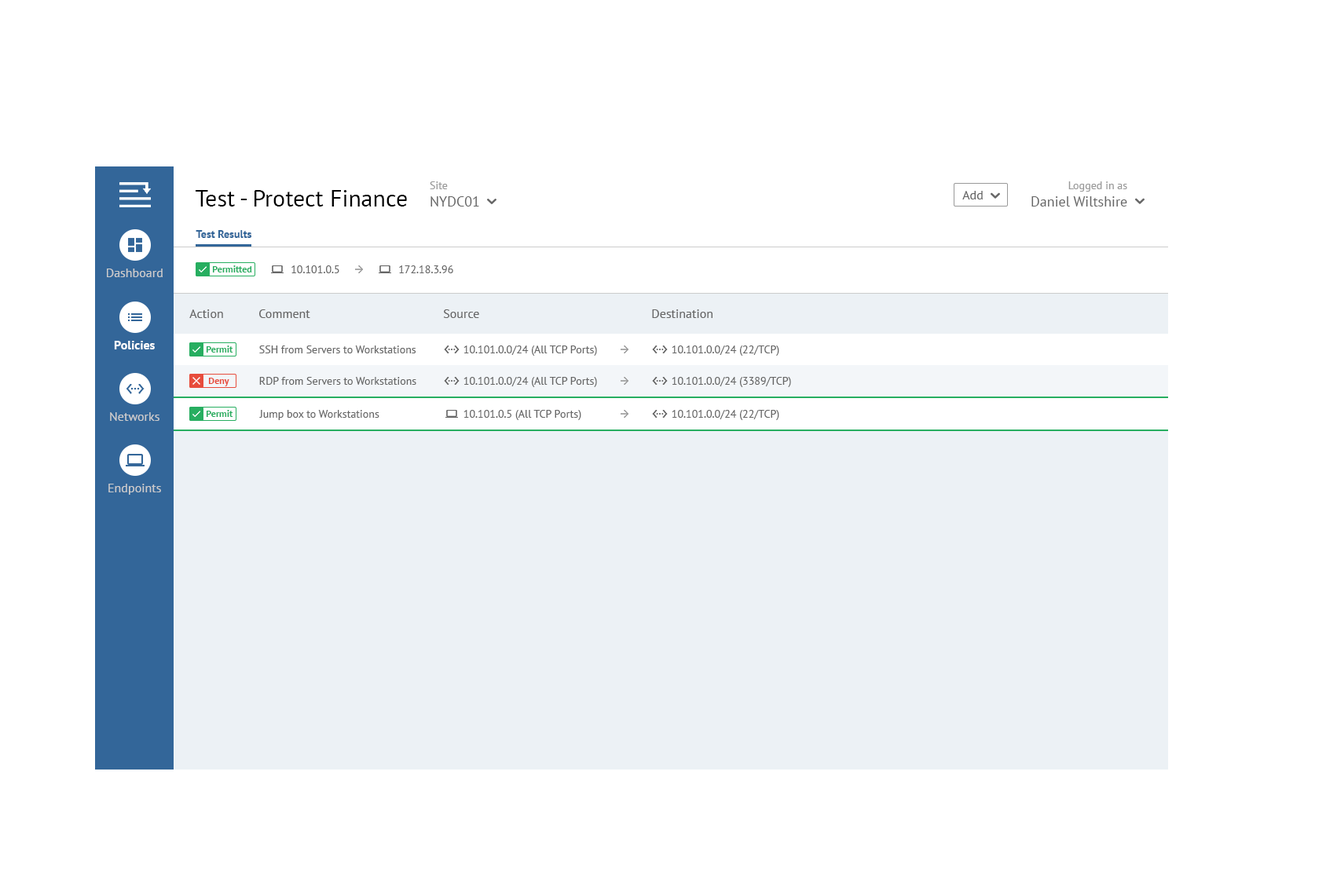
<style>
.page{position:relative;width:1337px;height:892px;background:#ffffff}
.page>*{position:absolute;margin:0}
.t1{font:14.1px "PTSans-Regular";color:#666666}
.t2{font:11px "PTSans-Regular";color:#999999}
.t3{font:14.3px "PTSans-Regular";color:#666666}
.t4{font:11.1px "PTSans-Regular";color:#999999}
.t5{font:23.6px "PTSans-Regular";color:#000000}
.t6{font:12.6px "PTSans-Regular";color:#666666}
.t7{font:10.9px "PTSans-Bold";color:#336699}
.t8{font:12.6px "PTSans-Regular";color:#cccccc}
.t9{font:9.4px "PTSans-Bold";color:#27ae60}
.t10{font:11px "PTSans-Regular";color:#666666}
.t11{font:12.6px "PTSans-Bold";color:#ffffff}
.t12{font:9.4px "PTSans-Bold";color:#e74c3c}
</style>
<div class="page">
<p class="t1" style="left:430px;top:181px;width:49px;height:26px"><span class="t2">Site<br></span>NYDC01</p>
<p class="t3" style="left:1031px;top:181px;width:96px;height:26px;text-align:right"><span class="t4">Logged in as<br></span>Daniel Wiltshire</p>
<p class="t5" style="left:196px;top:190px;width:211px;height:17px">Test - Protect Finance</p>
<p class="t6" style="left:962px;top:191px;width:20px;height:8px">Add</p>
<p class="t7" style="left:196px;top:230px;width:56px;height:8px">Test Results</p>
<p class="t8" style="left:107px;top:269px;width:56px;height:8px">Dashboard</p>
<p class="t9" style="left:212px;top:265px;width:40px;height:8px">Permitted</p>
<p class="t10" style="left:291px;top:265px;width:48px;height:8px">10.101.0.5</p>
<p class="t10" style="left:399px;top:265px;width:54px;height:8px">172.18.3.96</p>
<p class="t6" style="left:189px;top:309px;width:34px;height:9px">Action</p>
<p class="t6" style="left:259px;top:309px;width:51px;height:9px">Comment</p>
<p class="t6" style="left:443px;top:309px;width:36px;height:9px">Source</p>
<p class="t6" style="left:652px;top:309px;width:60px;height:9px">Destination</p>
<p class="t11" style="left:114px;top:341px;width:41px;height:8px">Policies</p>
<p class="t9" style="left:206px;top:346px;width:27px;height:7px">Permit</p>
<p class="t10" style="left:259px;top:346px;width:157px;height:7px">SSH from Servers to Workstations</p>
<p class="t10" style="left:463px;top:346px;width:134px;height:10px">10.101.0.0/24 (All TCP Ports)</p>
<p class="t10" style="left:671px;top:346px;width:108px;height:10px">10.101.0.0/24 (22/TCP)</p>
<p class="t12" style="left:208px;top:378px;width:21px;height:8px">Deny</p>
<p class="t10" style="left:259px;top:377px;width:157px;height:8px">RDP from Servers to Workstations</p>
<p class="t10" style="left:463px;top:377px;width:134px;height:10px">10.101.0.0/24 (All TCP Ports)</p>
<p class="t10" style="left:671px;top:377px;width:120px;height:10px">10.101.0.0/24 (3389/TCP)</p>
<p class="t8" style="left:110px;top:412px;width:49px;height:9px">Networks</p>
<p class="t9" style="left:206px;top:410px;width:27px;height:7px">Permit</p>
<p class="t10" style="left:259px;top:410px;width:120px;height:10px">Jump box to Workstations</p>
<p class="t10" style="left:463px;top:410px;width:118px;height:10px">10.101.0.5 (All TCP Ports)</p>
<p class="t10" style="left:671px;top:410px;width:108px;height:10px">10.101.0.0/24 (22/TCP)</p>
<p class="t8" style="left:108px;top:484px;width:53px;height:11px">Endpoints</p>
</div>
